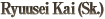
<style>
.page{position:relative;width:105px;height:19px;background:#ffffff}
.page>*{position:absolute;margin:0}
.t1{font:16px "RyuminPro-ExBold";letter-spacing:-0.09em;color:#4a3f32;font-weight:bold;scale:0.9 1}
</style>
<div class="page">
<p class="t1" style="left:0px;top:1px;width:104px;height:17px">Ryuusei Kai (Sk.)</p>
</div>
